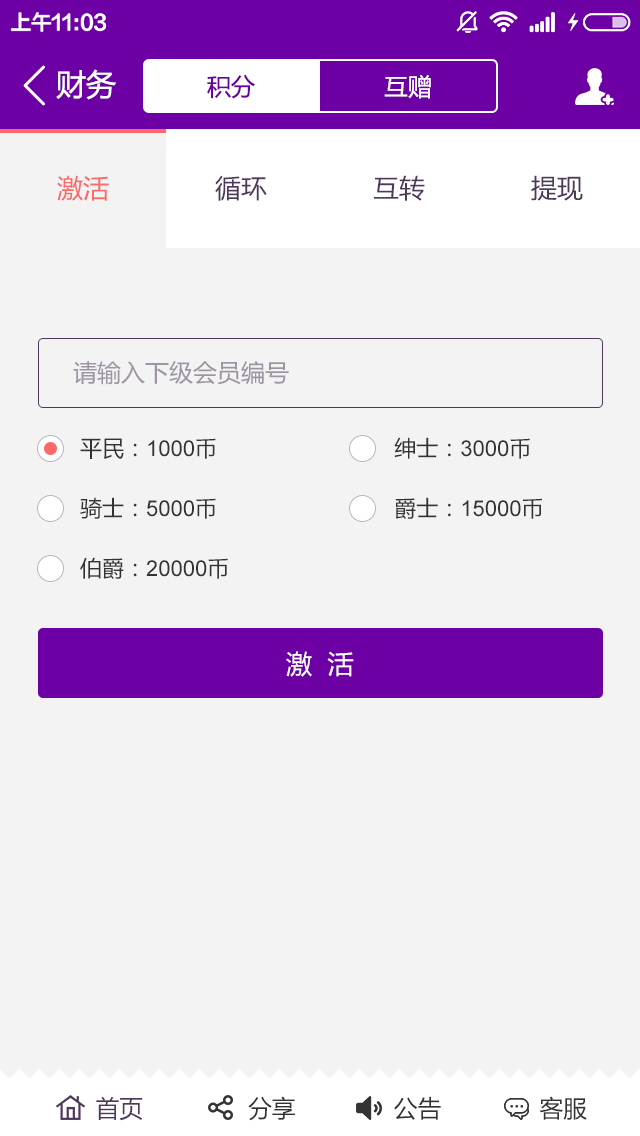
<style>
.page{position:relative;width:640px;height:1136px;background:#f3f3f3}
.page>*{position:absolute;margin:0}
.t1{font:30px "MicrosoftYaHei";color:#ffffff}
.t2{font:24px "MicrosoftYaHei";color:#6d00a5}
.t3{font:24px "MicrosoftYaHei";color:#ffffff}
.t4{font:26px "MicrosoftYaHei";color:#f96a69}
.t5{font:26px "MicrosoftYaHei";color:#50385b}
.t6{font:24px "MicrosoftYaHei";color:#9e95a2}
.t7{font:22px/60px "MicrosoftYaHei";color:#333333}
.t8{font:22px/60px "ArialMT";color:#333333}
.t9{font:26px "MicrosoftYaHei";color:#ffffff}
.t10{font:24px "MicrosoftYaHei";color:#333333}
.t11{font:24px "MicrosoftYaHei";color:#50385b}
</style>
<div class="page">
<p class="t1" style="left:56px;top:69px;width:60px;height:31px">财务</p>
<p class="t2" style="left:207px;top:74px;width:48px;height:25px">积分</p>
<p class="t3" style="left:384px;top:75px;width:47px;height:24px">互赠</p>
<p class="t4" style="left:57px;top:175px;width:52px;height:26px">激活</p>
<p class="t5" style="left:215px;top:175px;width:52px;height:26px">循环</p>
<p class="t5" style="left:374px;top:175px;width:51px;height:26px">互转</p>
<p class="t5" style="left:531px;top:175px;width:52px;height:26px">提现</p>
<p class="t6" style="left:73px;top:361px;width:216px;height:24px">请输入下级会员编号</p>
<p class="t7" style="left:80px;top:437px;width:462px;height:142px">平民：<span class="t8">1000</span>币                             绅士：<span class="t8">3000</span>币<br>骑士：<span class="t8">5000</span>币                             爵士：<span class="t8">15000</span>币<br>伯爵：<span class="t8">20000</span>币</p>
<p class="t9" style="left:286px;top:651px;width:68px;height:26px">激  活</p>
<p class="t10" style="left:96px;top:1096px;width:491px;height:25px"><span class="t11">首页</span>               分享              公告              客服</p>
</div>
